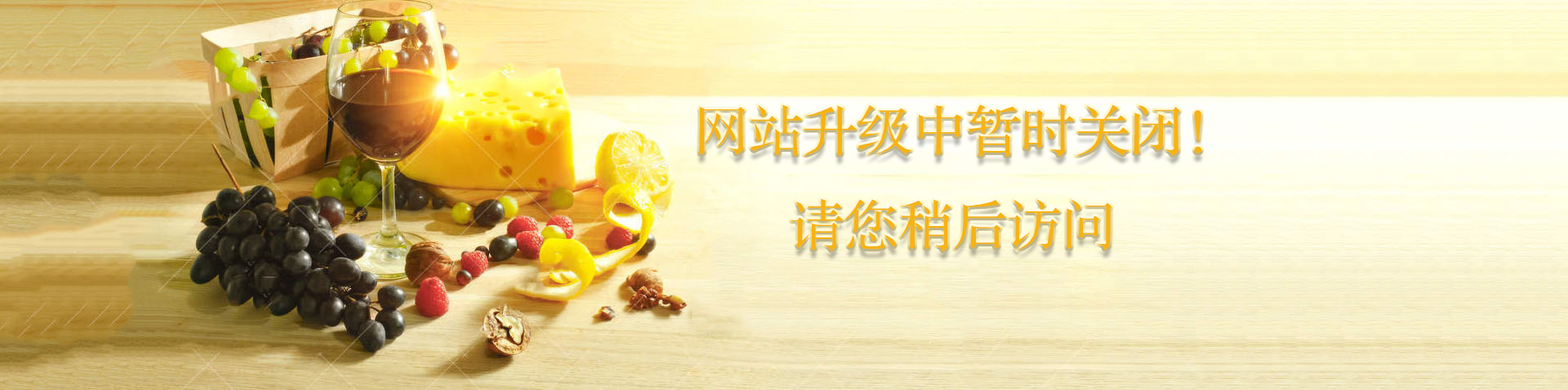
<style>
.page{position:relative;width:1568px;height:390px}
.page>*{position:absolute;margin:0}
.t1{font:54.4px "FZS3JW--GB1-0";color:#f7b313}
</style>
<div class="page">
<p class="t1" style="left:699px;top:104px;width:503px;height:148px">网站升级中暂时关闭！<br>       请您稍后访问</p>
</div>
